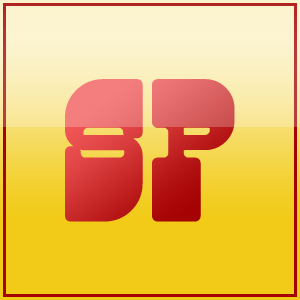
<style>
.page{position:relative;width:300px;height:300px;background:#f1cb17}
.page>*{position:absolute;margin:0}
.t1{font:180px "Superfly";color:#a60303;font-weight:bold}
</style>
<div class="page">
<p class="t1" style="left:65px;top:79px;width:170px;height:143px">SP</p>
</div>
